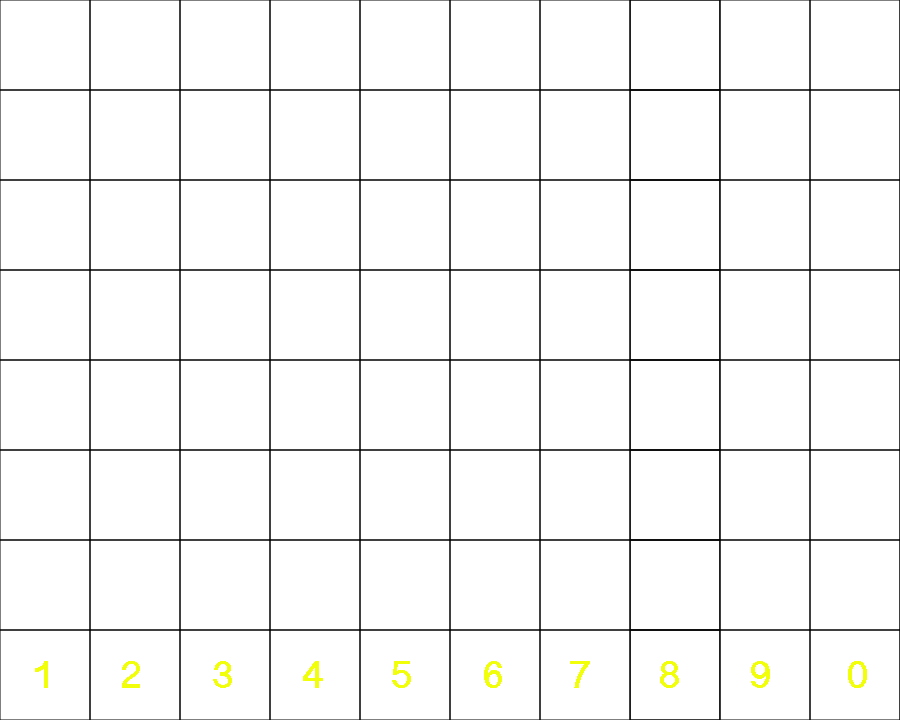
<style>
.page{position:relative;width:900px;height:720px;background:#ffffff}
.page>*{position:absolute;margin:0}
.t1{font:45px "OriyaSangamMN-Bold";color:#f1ff0b}
</style>
<div class="page">
<p class="t1" style="left:35px;top:661px;width:13px;height:27px">1</p>
<p class="t1" style="left:122px;top:661px;width:18px;height:27px">2</p>
<p class="t1" style="left:213px;top:661px;width:19px;height:27px">3</p>
<p class="t1" style="left:303px;top:661px;width:20px;height:27px">4</p>
<p class="t1" style="left:392px;top:661px;width:19px;height:27px">5</p>
<p class="t1" style="left:484px;top:661px;width:18px;height:27px">6</p>
<p class="t1" style="left:570px;top:661px;width:20px;height:27px">7</p>
<p class="t1" style="left:660px;top:661px;width:19px;height:27px">8</p>
<p class="t1" style="left:751px;top:661px;width:19px;height:27px">9</p>
<p class="t1" style="left:848px;top:661px;width:19px;height:27px">0</p>
</div>
